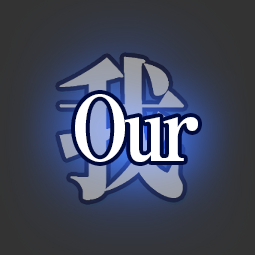
<style>
.page{position:relative;width:255px;height:255px}
.page>*{position:absolute;margin:0}
.t1{font:90px "RyuminPro-ExBold";letter-spacing:-0.08em;color:#ffffff;scale:0.85 1}
</style>
<div class="page">
<p class="t1" style="left:75px;top:94px;width:123px;height:68px">Our</p>
</div>
